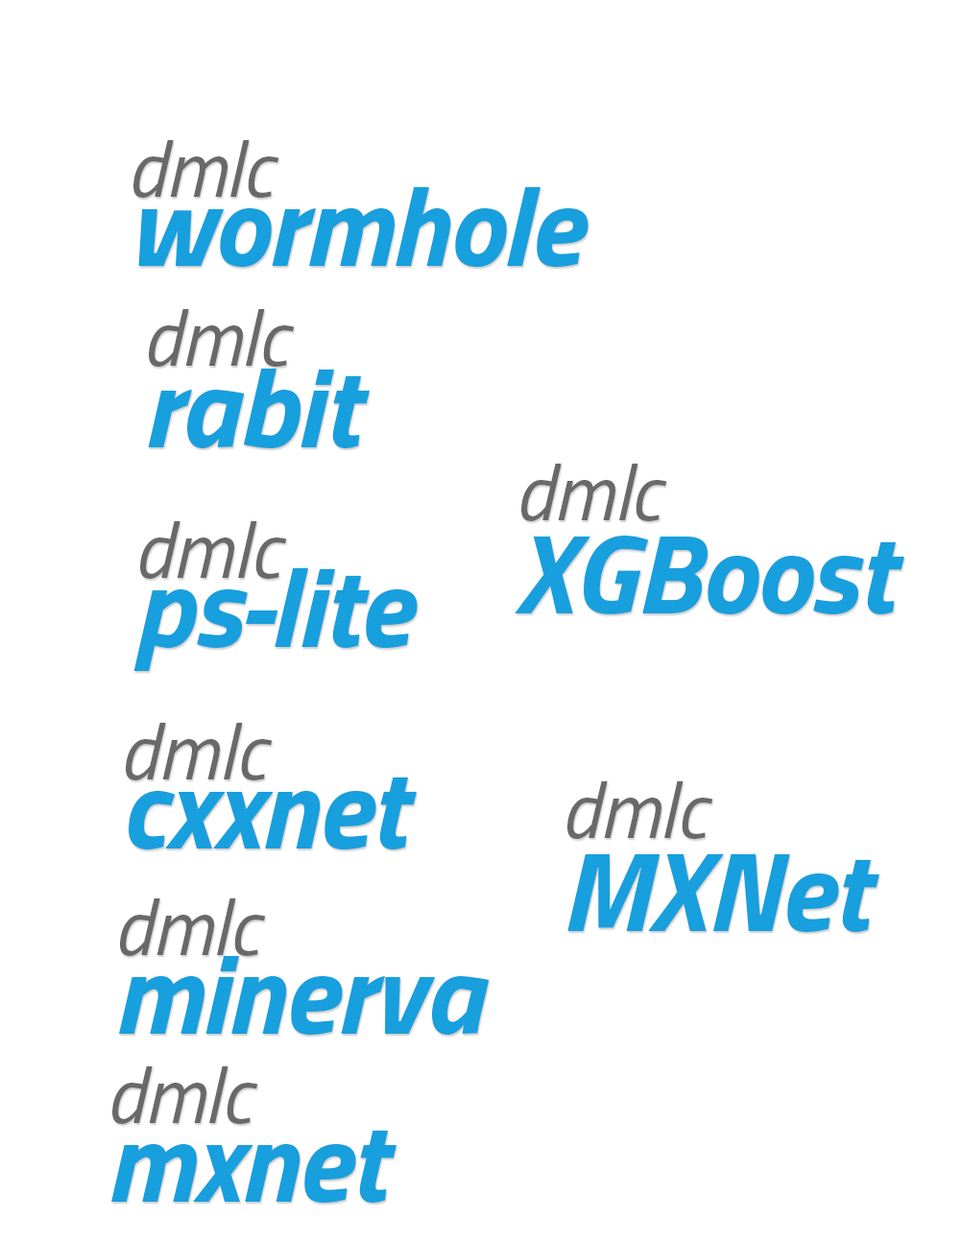
<style>
.page{position:relative;width:960px;height:1242px;background:#ffffff}
.page>*{position:absolute;margin:0}
.t1{font:112.9px/40.8px "Titillium-BoldItalic";letter-spacing:-0.01em;color:#189fdd}
.t2{font:78.4px/40.8px "Titillium-RegularItalic";letter-spacing:-0.01em;color:#6a6969}
.t3{font:112.9px/53.3px "Titillium-BoldItalic";letter-spacing:-0.01em;color:#189fdd}
.t4{font:78.4px/53.3px "Titillium-RegularItalic";letter-spacing:-0.01em;color:#6a6969}
.t5{font:112.9px/64px "Titillium-BoldItalic";letter-spacing:-0.01em;color:#189fdd}
.t6{font:78.4px/64px "Titillium-RegularItalic";letter-spacing:-0.01em;color:#6a6969}
.t7{font:112.9px/50.2px "Titillium-BoldItalic";letter-spacing:-0.01em;color:#189fdd}
.t8{font:78.4px/50.2px "Titillium-RegularItalic";letter-spacing:-0.01em;color:#6a6969}
</style>
<div class="page">
<p class="t1" style="left:133px;top:140px;width:455px;height:128px"><span class="t2">dmlc<br></span>wormhole</p>
<p class="t3" style="left:148px;top:309px;width:222px;height:140px"><span class="t4">dmlc<br></span>rabit</p>
<p class="t5" style="left:515px;top:464px;width:389px;height:151px"><span class="t6">dmlc<br></span>XGBoost</p>
<p class="t1" style="left:133px;top:521px;width:285px;height:150px"><span class="t2">dmlc<br></span>ps-lite</p>
<p class="t1" style="left:126px;top:723px;width:291px;height:128px"><span class="t2">dmlc<br></span>cxxnet</p>
<p class="t5" style="left:567px;top:781px;width:312px;height:152px"><span class="t6">dmlc<br></span>MXNet</p>
<p class="t7" style="left:119px;top:899px;width:371px;height:137px"><span class="t8">dmlc<br></span>minerva</p>
<p class="t7" style="left:111px;top:1067px;width:285px;height:137px"><span class="t8">dmlc<br></span>mxnet</p>
</div>
